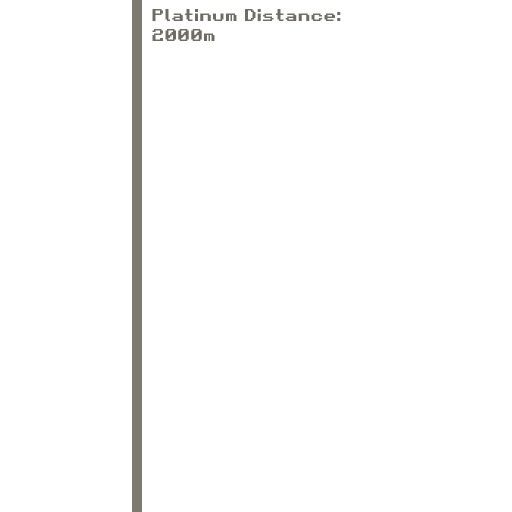
<style>
.page{position:relative;width:512px;height:512px;background:#ffffff}
.page>*{position:absolute;margin:0}
.t1{font:16.7px "RetroGaming";color:#6f6c63}
</style>
<div class="page">
<p class="t1" style="left:152px;top:9px;width:189px;height:32px">Platinum Distance:<br>2000m</p>
</div>
